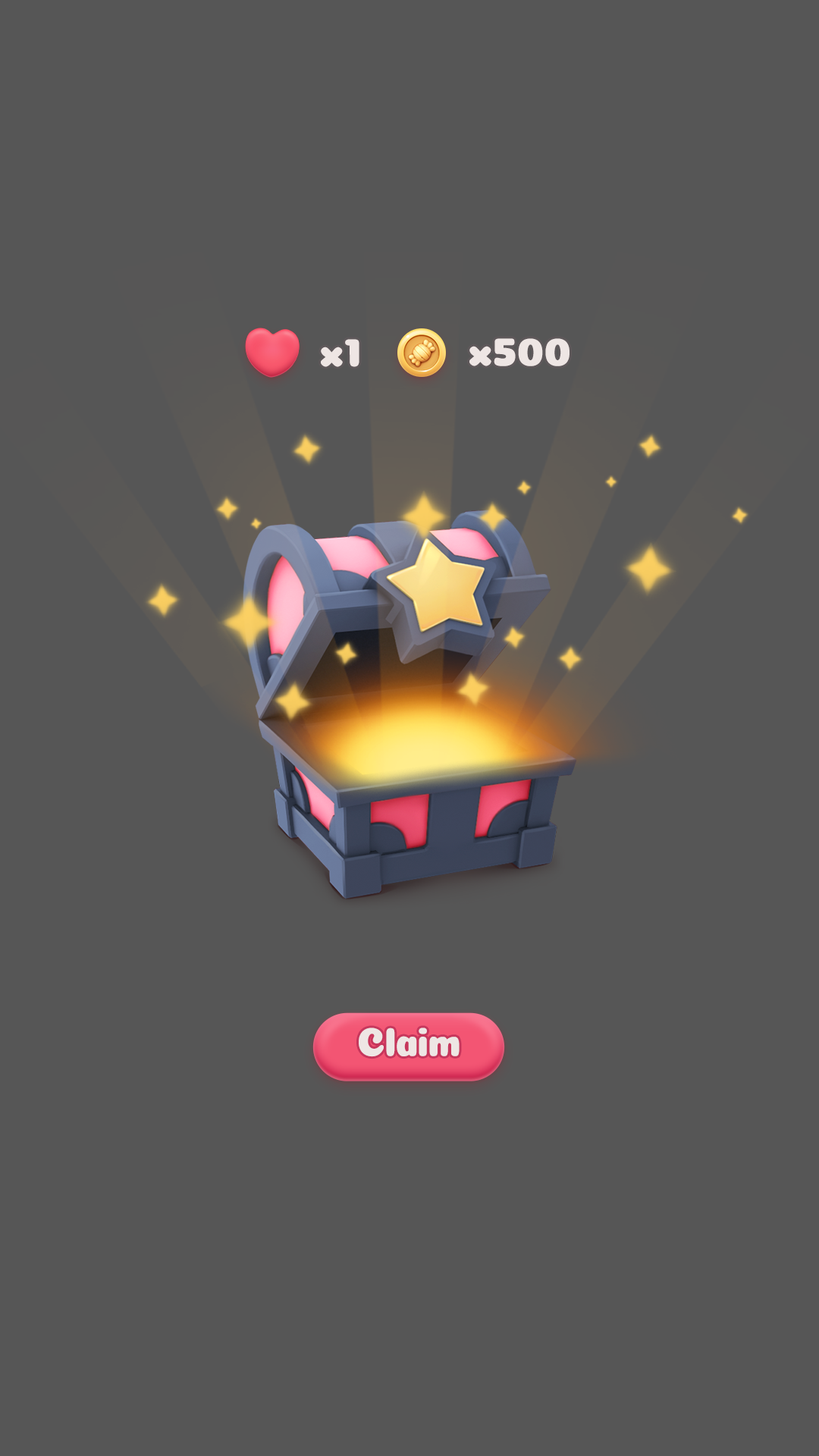
<style>
.page{position:relative;width:819px;height:1456px;background:#565656}
.page>*{position:absolute;margin:0}
.t1{font:40.9px "Coiny-Regular";color:#eee6e4}
.t2{font:40.9px "Coiny-Regular";letter-spacing:-0.025em;color:#eee6e4;scale:0.9 1}
</style>
<div class="page">
<p class="t1" style="left:321px;top:339px;width:38px;height:28px">x1</p>
<p class="t1" style="left:469px;top:338px;width:101px;height:28px">x500</p>
<p class="t2" style="left:359px;top:1028px;width:101px;height:29px">Claim</p>
</div>
